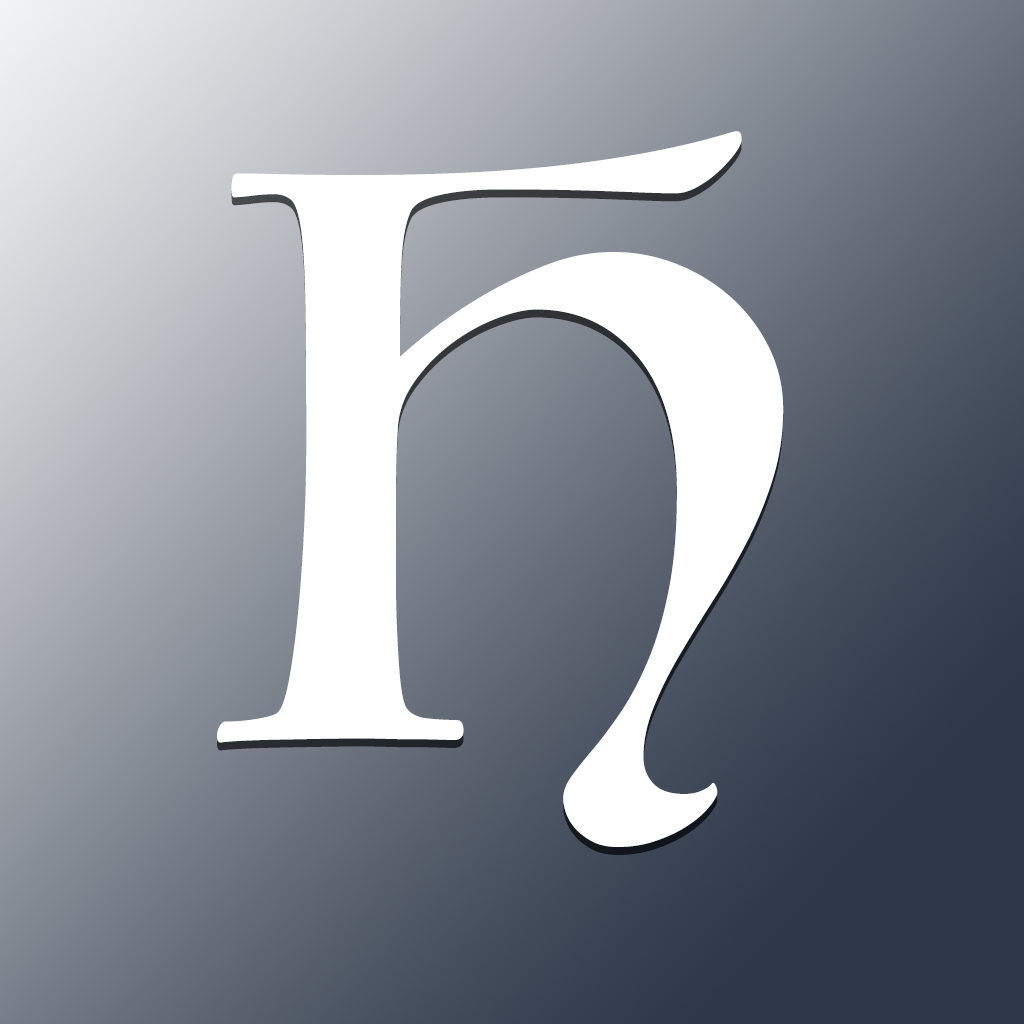
<style>
.page{position:relative;width:1024px;height:1024px}
.page>*{position:absolute;margin:0}
.t1{font:785.4px "Luminari-Regular";color:#ffffff}
</style>
<div class="page">
<p class="t1" style="left:217px;top:131px;width:567px;height:716px">H</p>
<p class="t1" style="left:217px;top:139px;width:567px;height:716px">H</p>
</div>
